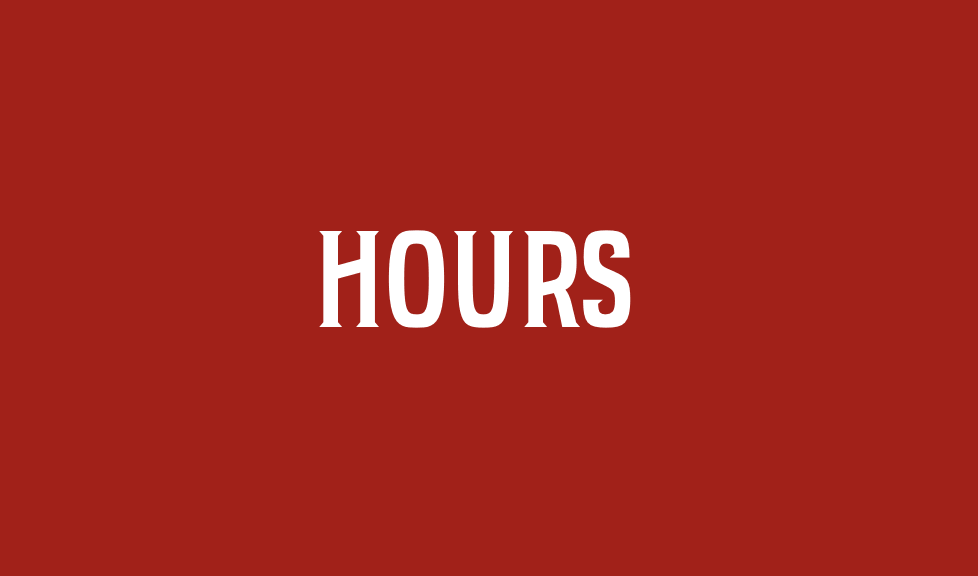
<style>
.page{position:relative;width:978px;height:576px;background:#a12119}
.page>*{position:absolute;margin:0}
.t1{font:137.2px "BartenderW01-Regular";letter-spacing:-0.03em;color:#ffffff}
</style>
<div class="page">
<p class="t1" style="left:319px;top:230px;width:312px;height:98px">HOURS</p>
</div>
